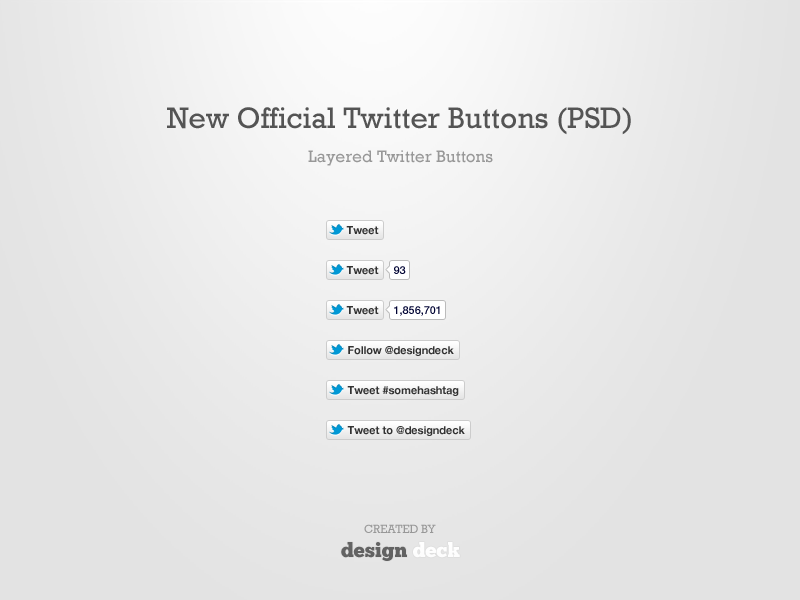
<style>
.page{position:relative;width:800px;height:600px}
.page>*{position:absolute;margin:0}
.t1{font:30px "Rockwell";color:#545454}
.t2{font:17px "Rockwell";color:#989898}
.t3{font:11px "HelveticaNeue-Bold";letter-spacing:-0.005em;color:#323232}
.t4{font:11px "HelveticaNeue-Medium";letter-spacing:-0.005em;color:#000333}
.t5{font:12px "Rockwell";letter-spacing:-0.015em;color:#989898;text-transform:uppercase}
.t6{font:20px "ChunkFive";letter-spacing:0.005em;color:#626262}
.t7{font:20px "ChunkFive";letter-spacing:0.005em;color:#ffffff}
</style>
<div class="page">
<p class="t1" style="left:167px;top:107px;width:464px;height:28px">New Official Twitter Buttons (PSD)</p>
<p class="t2" style="left:308px;top:150px;width:185px;height:16px">Layered Twitter Buttons</p>
<p class="t3" style="left:346px;top:226px;width:33px;height:9px">Tweet</p>
<p class="t3" style="left:346px;top:266px;width:33px;height:9px">Tweet</p>
<p class="t4" style="left:394px;top:266px;width:12px;height:8px">93</p>
<p class="t3" style="left:346px;top:306px;width:33px;height:9px">Tweet</p>
<p class="t4" style="left:394px;top:306px;width:46px;height:10px">1,856,701</p>
<p class="t3" style="left:348px;top:346px;width:106px;height:10px">Follow @designdeck</p>
<p class="t3" style="left:347px;top:386px;width:112px;height:10px">Tweet #somehashtag</p>
<p class="t3" style="left:347px;top:426px;width:118px;height:10px">Tweet to @designdeck</p>
<p class="t5" style="left:364px;top:524px;width:72px;height:9px">Created by</p>
<p class="t6" style="left:341px;top:542px;width:119px;height:19px">design <span class="t7">deck</span></p>
</div>
